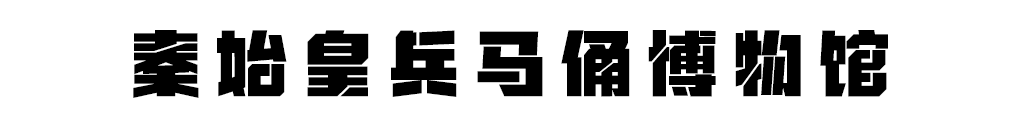
<style>
.page{position:relative;width:1024px;height:128px;background:#ffffff}
.page>*{position:absolute;margin:0}
.t1{font:71.8px "AaJiJiaHei";letter-spacing:0.2em;color:#000000}
</style>
<div class="page">
<p class="t1" style="left:133px;top:30px;width:755px;height:68px">秦始皇兵马俑博物馆</p>
</div>
